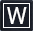
<style>
.page{position:relative;width:33px;height:31px}
.page>*{position:absolute;margin:0}
.t1{font:22.7px "Roboto-Regular";color:#ffffff}
</style>
<div class="page">
<p class="t1" style="left:7px;top:7px;width:20px;height:17px">W</p>
</div>
